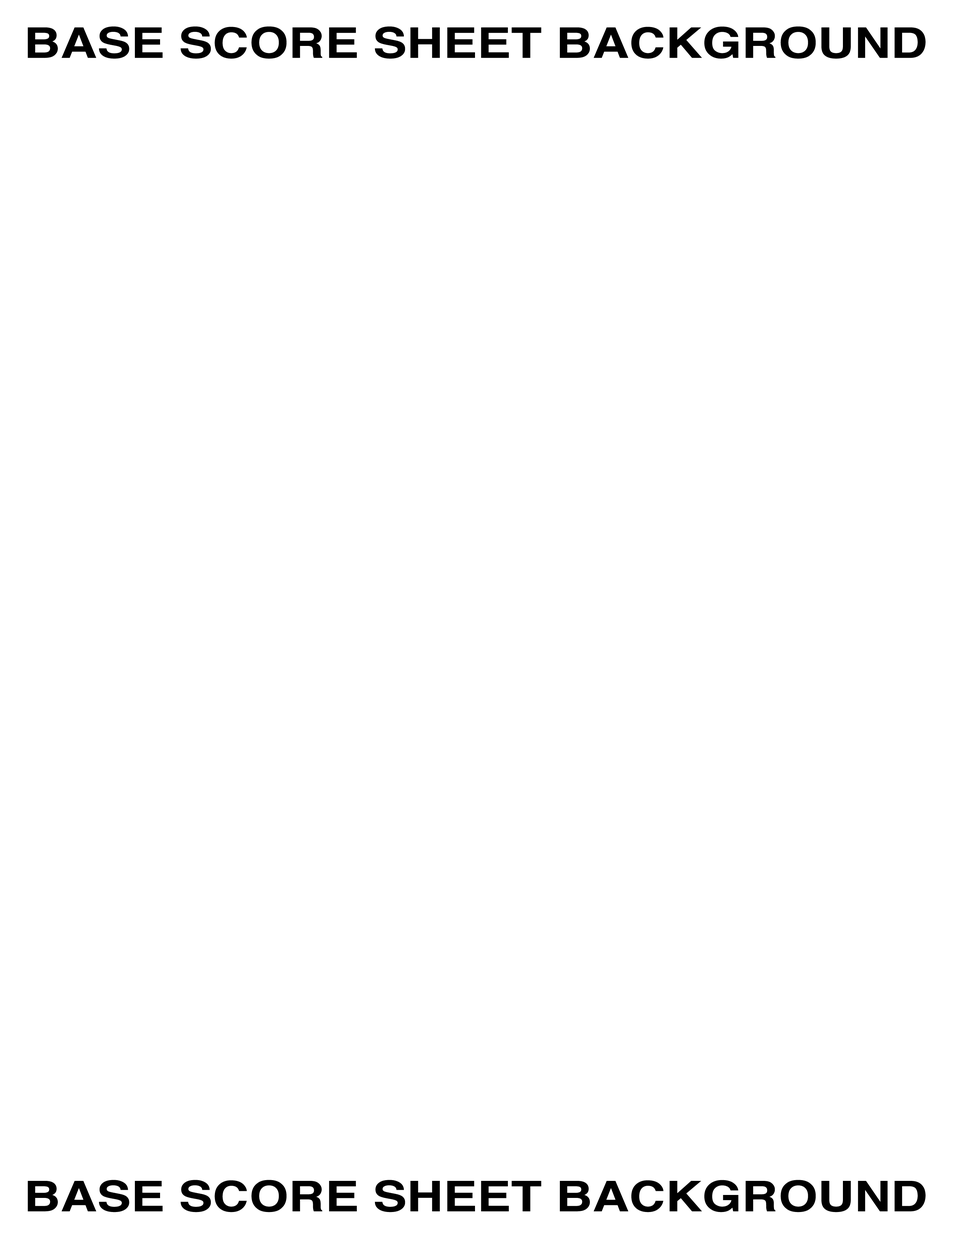
<style>
.page{position:relative;width:960px;height:1242px;background:#ffffff}
.page>*{position:absolute;margin:0}
.t1{font:42.2px "Helvetica-Bold";color:#000000;scale:1.2 1}
</style>
<div class="page">
<p class="t1" style="left:28px;top:26px;width:897px;height:33px">BASE SCORE SHEET BACKGROUND</p>
<p class="t1" style="left:28px;top:1180px;width:897px;height:33px">BASE SCORE SHEET BACKGROUND</p>
</div>
